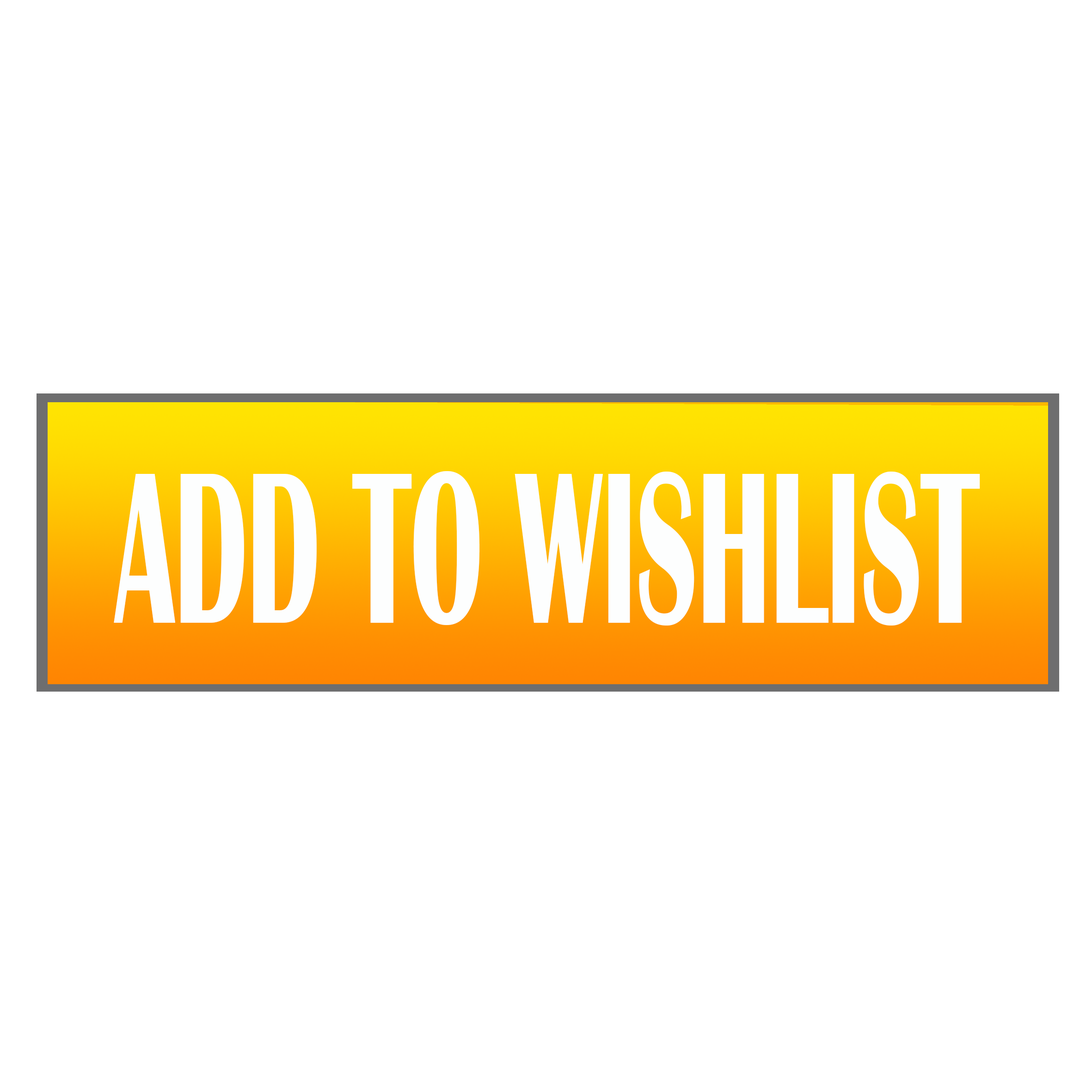
<style>
.page{position:relative;width:1092px;height:1092px;background:#ffffff}
.page>*{position:absolute;margin:0}
.t1{font:223.2px "BritannicBold";color:#fdfefe;scale:0.5 1}
</style>
<div class="page">
<p class="t1" style="left:114px;top:471px;width:866px;height:155px">ADD TO WISHLIST</p>
</div>
